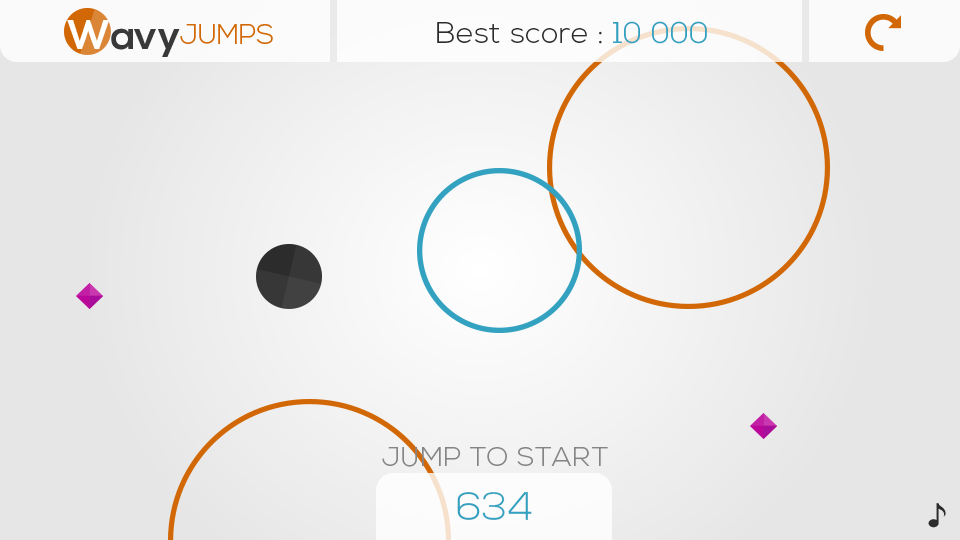
<style>
.page{position:relative;width:960px;height:540px;background:#e6e6e6}
.page>*{position:absolute;margin:0}
.t1{font:30px "NexaLight";letter-spacing:0.01em;color:#2c2c2c}
.t2{font:30px "NexaLight";letter-spacing:0.01em;color:#33a2c1}
.t3{font:27.3px "NexaLight";letter-spacing:0.01em;color:#858585}
.t4{font:39.2px "NexaLight";letter-spacing:0.01em;color:#33a2c1}
</style>
<div class="page">
<p class="t1" style="left:437px;top:21px;width:270px;height:23px">Best score : <span class="t2">10 000</span></p>
<p class="t3" style="left:382px;top:447px;width:226px;height:20px">JUMP TO START</p>
<p class="t4" style="left:457px;top:492px;width:75px;height:28px">634</p>
</div>
